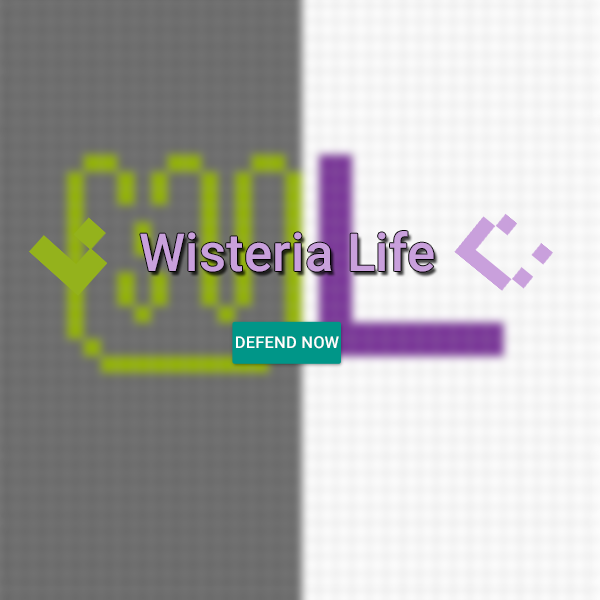
<style>
.page{position:relative;width:600px;height:600px}
.page>*{position:absolute;margin:0}
.t1{font:52.5px "Roboto-Medium";letter-spacing:0.005em;color:#c9a0dc}
.t2{font:16.3px "Roboto-Medium";letter-spacing:0.01em;color:#ffffff}
</style>
<div class="page">
<p class="t1" style="left:140px;top:231px;width:294px;height:41px">Wisteria Life</p>
<p class="t2" style="left:236px;top:336px;width:103px;height:13px">DEFEND NOW</p>
</div>
